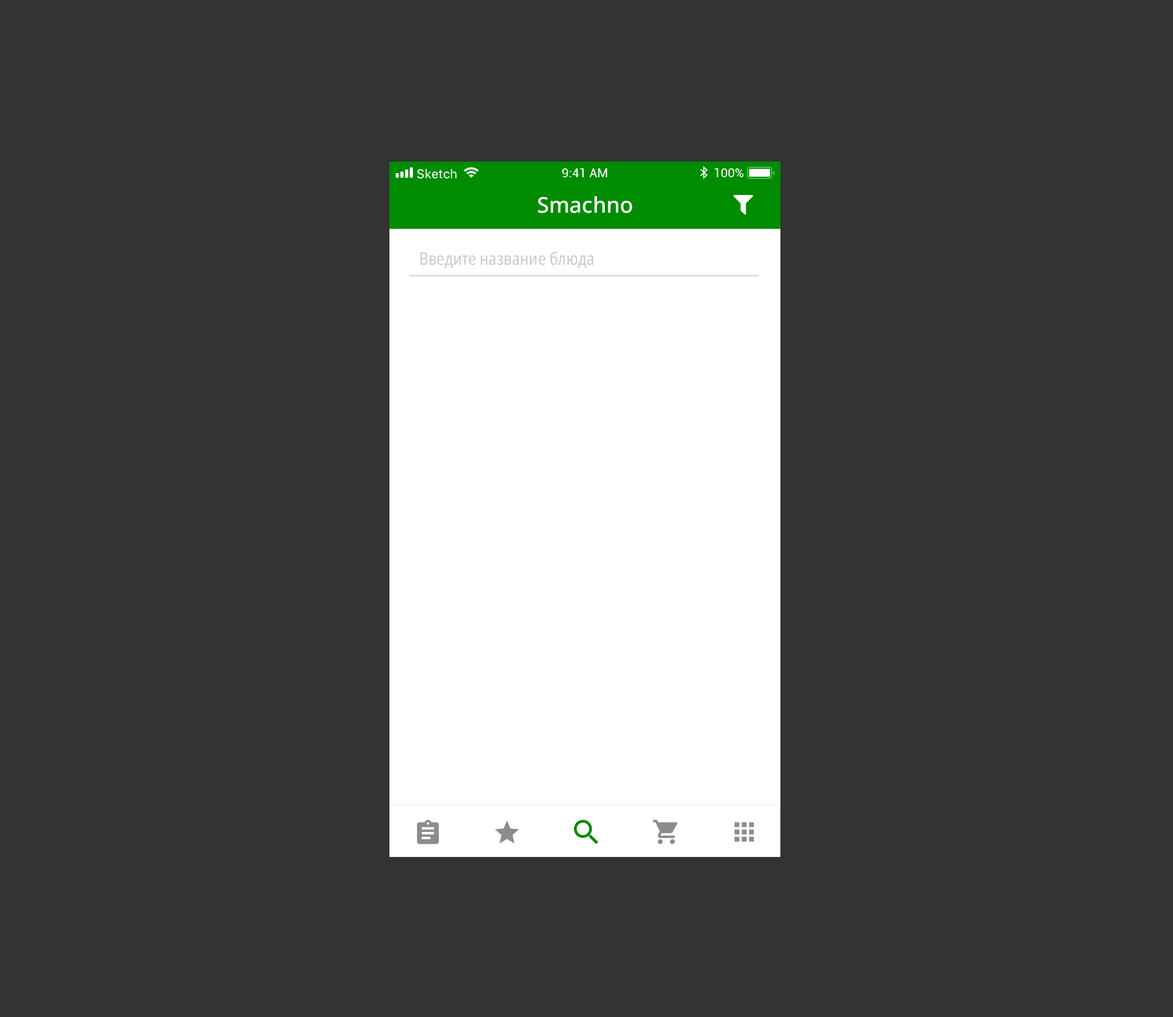
<style>
.page{position:relative;width:1173px;height:1017px;background:#333333}
.page>*{position:absolute;margin:0}
.t1{font:21.7px "NotoSans-Medium";color:#ffffff}
.t2{font:17.4px "NotoSans-Condensed";color:#cccccc}
</style>
<div class="page">
<p class="t1" style="left:538px;top:196px;width:94px;height:17px">Smachno</p>
<p class="t2" style="left:420px;top:251px;width:173px;height:17px">Введите название блюда</p>
</div>
